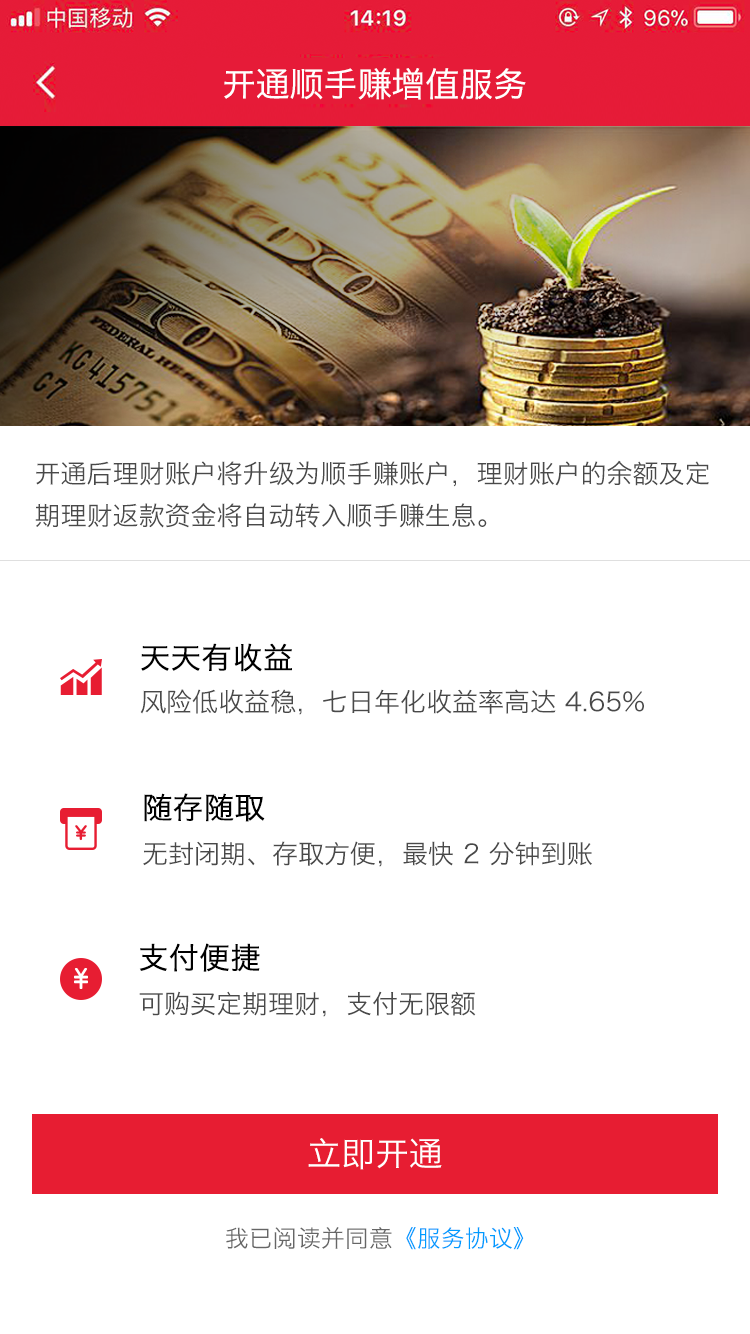
<style>
.page{position:relative;width:750px;height:1334px;background:#ffffff}
.page>*{position:absolute;margin:0}
.t1{font:34px "HiraginoSansGB-W3";color:#ffffff}
.t2{font:26px/42px "HiraginoSansGB-W3";color:#494949}
.t3{font:26px/46px "HiraginoSansGB-W3";color:#494949}
.t4{font:30px/46px "HiraginoSansGB-W3";color:#000000;font-weight:bold}
.t5{font:26px/48px "HiraginoSansGB-W3";color:#494949}
.t6{font:30px/48px "HiraginoSansGB-W3";color:#000000;font-weight:bold}
.t7{font:24px "HiraginoSansGB-W3";color:#666666}
.t8{font:24px "HiraginoSansGB-W3";color:#009cff}
</style>
<div class="page">
<p class="t1" style="left:224px;top:68px;width:302px;height:32px">开通顺手赚增值服务</p>
<p class="t2" style="left:35px;top:460px;width:674px;height:68px">开通后理财账户将升级为顺手赚账户，理财账户的余额及定<br>期理财返款资金将自动转入顺手赚生息。</p>
<p class="t3" style="left:140px;top:643px;width:504px;height:72px"><span class="t4">天天有收益</span> <br>风险低收益稳，七日年化收益率高达 4.65%</p>
<p class="t5" style="left:143px;top:793px;width:449px;height:74px"><span class="t6">随存随取</span> <br>无封闭期、存取方便，最快 2 分钟到账</p>
<p class="t5" style="left:139px;top:943px;width:337px;height:74px"><span class="t6">支付便捷</span> <br>可购买定期理财，支付无限额</p>
<p class="t1" style="left:308px;top:1138px;width:134px;height:32px">立即开通</p>
<p class="t7" style="left:226px;top:1227px;width:298px;height:23px">我已阅读并同意<span class="t8">《服务协议》</span></p>
</div>
